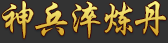
<style>
.page{position:relative;width:168px;height:43px;background:#333333}
.page>*{position:absolute;margin:0}
.t1{font:38.9px "CTXingKaiSJ";letter-spacing:-0.15em}
</style>
<div class="page">
<p class="t1" style="left:2px;top:1px;width:164px;height:38px">神兵淬炼丹</p>
</div>
